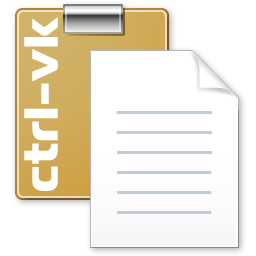
<style>
.page{position:relative;width:256px;height:256px;background:#ffffff}
.page>*{position:absolute;margin:0}
.t1{font:48px "MagistralBlackC";letter-spacing:0.04em;color:#ffffff}
</style>
<div class="page">
<p class="t1" style="left:24px;top:17px;width:34px;height:174px;rotate:-90deg">ctrl-vk</p>
</div>
